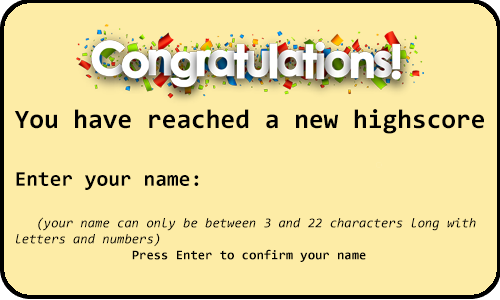
<style>
.page{position:relative;width:500px;height:300px;background:#fdeca6}
.page>*{position:absolute;margin:0}
.t1{font:13.3px "Consolas-Italic";color:#000000}
.t2{font:26.8px "Consolas-Bold";color:#000000}
.t3{font:21.3px "Consolas-Bold";color:#000000}
.t4{font:13.3px "Consolas-Bold";color:#000000}
</style>
<div class="page">
<p class="t1" style="left:14px;top:109px;width:470px;height:153px"><span class="t2">You have reached a new highscore<br><br></span><span class="t3">Enter your name: <br>  <br></span>   (your name can only be between 3 and 22 characters long with <br>letters and numbers)<br>                <span class="t4">Press Enter to confirm your name</span></p>
</div>
